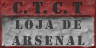
<style>
.page{position:relative;width:96px;height:48px}
.page>*{position:absolute;margin:0}
.t1{font:16.7px "Army";color:#303030;text-transform:uppercase}
.t2{font:13.5px/16px "Army";letter-spacing:0.18em;color:#3f3f3f;text-transform:uppercase}
</style>
<div class="page">
<p class="t1" style="left:13px;top:1px;width:70px;height:13px">c. t. c. t</p>
<p class="t2" style="left:11px;top:20px;width:74px;height:25px;text-align:center">loja de<br>arsenal</p>
</div>
